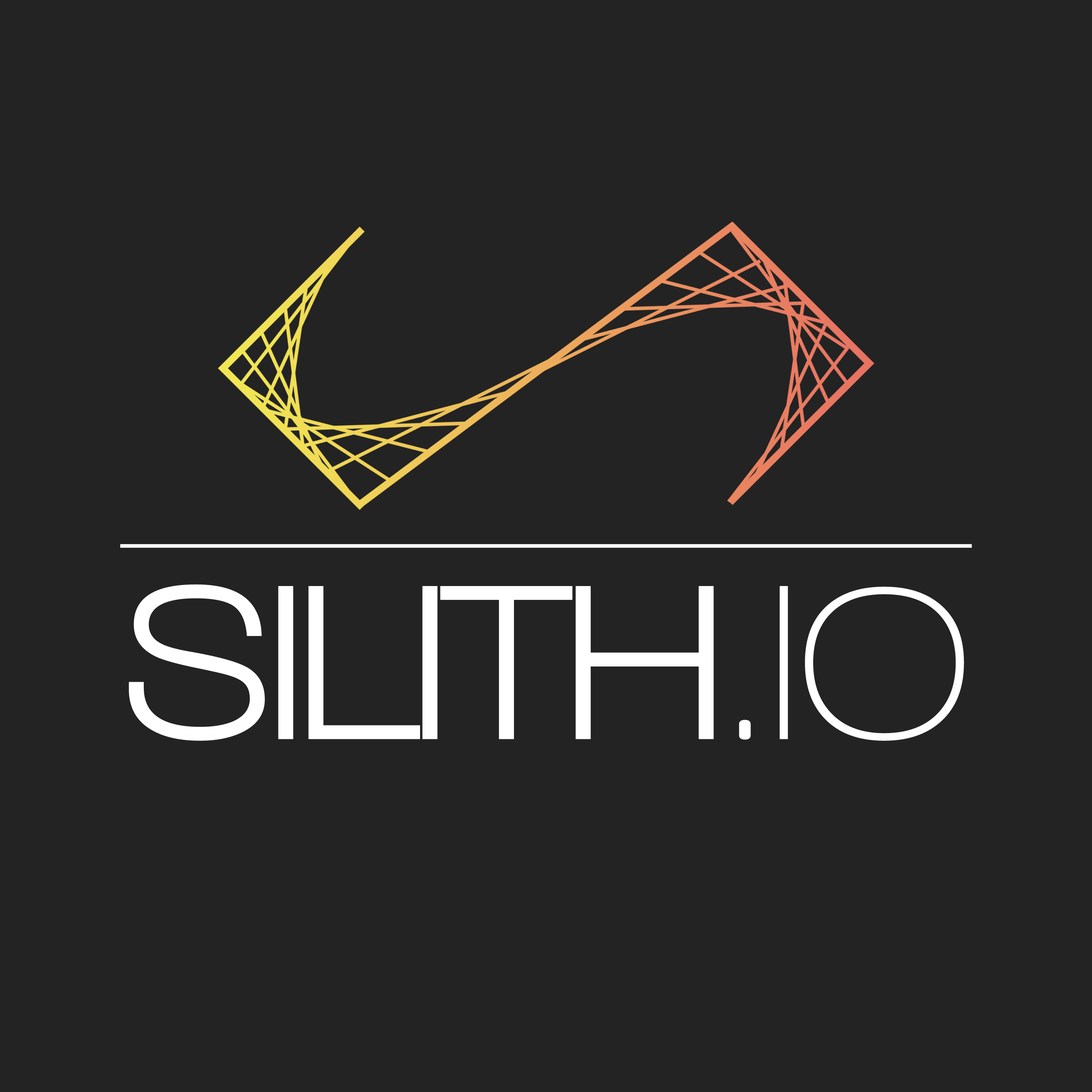
<style>
.page{position:relative;width:1092px;height:1092px;background:#232323}
.page>*{position:absolute;margin:0}
.t1{font:225.7px "WalkwayUltraBold";color:#ffffff}
.t2{font:225.7px "WalkwayBold";color:#ffffff}
.t3{font:225.7px "WalkwaySemiBold";color:#ffffff}
</style>
<div class="page">
<p class="t1" style="left:129px;top:584px;width:835px;height:157px">SILITH<span class="t2">.</span><span class="t3">IO</span></p>
</div>
